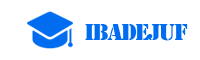
<style>
.page{position:relative;width:200px;height:60px;background:#ffffff}
.page>*{position:absolute;margin:0}
.t1{font:24px "Stencil";letter-spacing:-0.06em;color:#006df0}
</style>
<div class="page">
<p class="t1" style="left:85px;top:24px;width:103px;height:17px">IBADEJUF</p>
</div>
